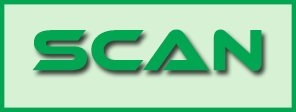
<style>
.page{position:relative;width:296px;height:112px;background:#d6f1d3}
.page>*{position:absolute;margin:0}
.t1{font:60px "EthnocentricRg-Regular";color:#00a651}
</style>
<div class="page">
<p class="t1" style="left:32px;top:29px;width:230px;height:42px">scan</p>
</div>
